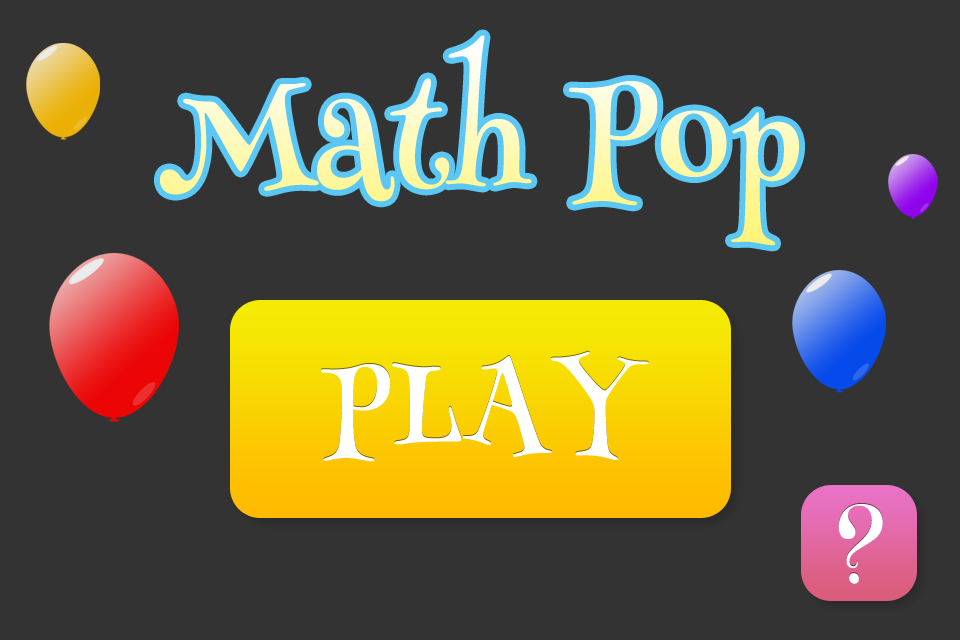
<style>
.page{position:relative;width:960px;height:640px;background:#333333}
.page>*{position:absolute;margin:0}
.t1{font:141.6px "HennyPenny-Regular"}
.t2{font:110.9px "HennyPenny-Regular";color:#ffffff}
.t3{font:85.6px "HennyPenny-Regular";color:#ffffff}
</style>
<div class="page">
<p class="t1" style="left:160px;top:35px;width:639px;height:211px">Math Pop</p>
<p class="t2" style="left:321px;top:351px;width:328px;height:111px">PLAY</p>
<p class="t3" style="left:838px;top:504px;width:45px;height:80px">?</p>
</div>
